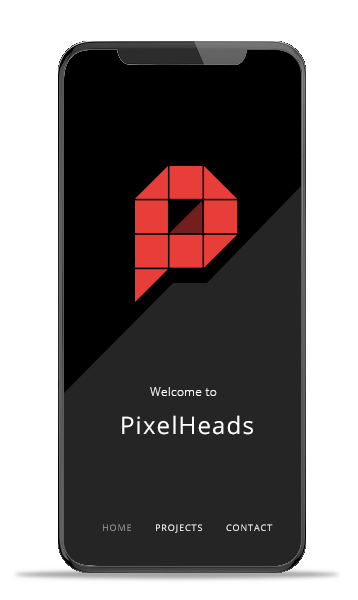
<style>
.page{position:relative;width:358px;height:600px;background:#ffffff}
.page>*{position:absolute;margin:0}
.t1{font:12px "OpenSans-Light";letter-spacing:0.025em;color:#ffffff}
.t2{font:24px "OpenSans-Regular";letter-spacing:0.05em;color:#ffffff}
.t3{font:9px "OpenSans-Regular";letter-spacing:0.1em;color:#ffffff}
.t4{font:9px "OpenSans-Regular";letter-spacing:0.1em;color:#999999}
</style>
<div class="page">
<p class="t1" style="left:150px;top:387px;width:67px;height:9px">Welcome to</p>
<p class="t2" style="left:122px;top:415px;width:131px;height:20px">PixelHeads</p>
<p class="t3" style="left:103px;top:524px;width:170px;height:9px"><span class="t4">HOME       </span>PROJECTS       CONTACT</p>
</div>
